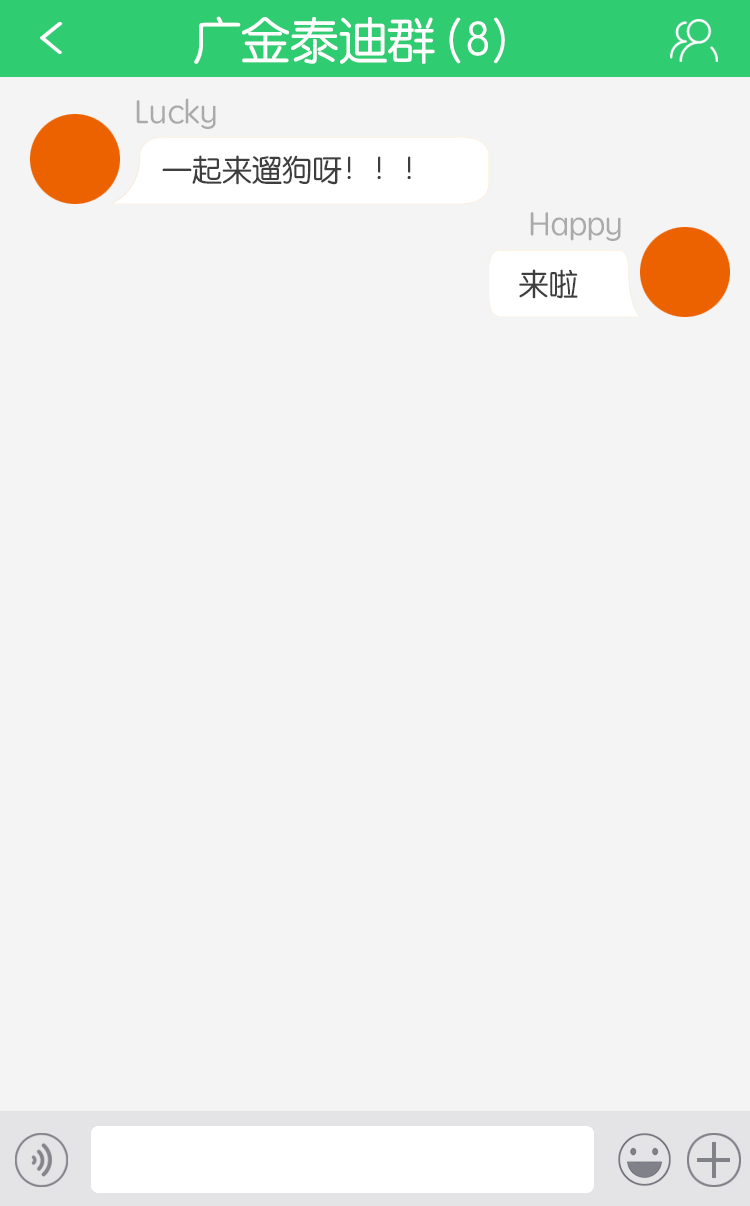
<style>
.page{position:relative;width:750px;height:1206px;background:#f4f4f4}
.page>*{position:absolute;margin:0}
.t1{font:48.7px "STYuanti-SC-Regular";color:#ffffff}
.t2{font:33px "STYuanti-SC-Regular";color:#aaaaaa}
.t3{font:30px "STYuanti-SC-Regular";color:#3e3e3e}
</style>
<div class="page">
<p class="t1" style="left:194px;top:16px;width:311px;height:48px">广金泰迪群(8)</p>
<p class="t2" style="left:136px;top:98px;width:80px;height:31px">Lucky</p>
<p class="t3" style="left:162px;top:155px;width:249px;height:30px">一起来遛狗呀！！！</p>
<p class="t2" style="left:530px;top:212px;width:91px;height:29px">Happy</p>
<p class="t3" style="left:519px;top:269px;width:59px;height:30px">来啦</p>
</div>
